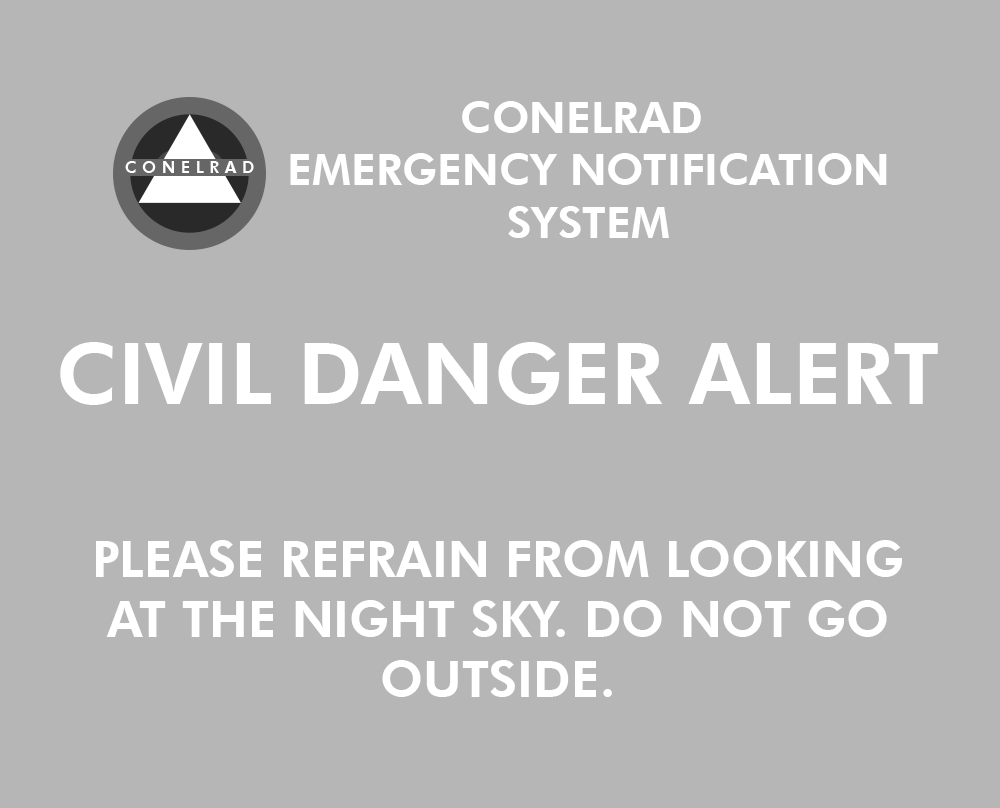
<style>
.page{position:relative;width:1000px;height:808px;background:#b6b6b6}
.page>*{position:absolute;margin:0}
.t1{font:43.7px "FuturaBT-Heavy";color:#ffffff;text-transform:uppercase}
.t2{font:16.3px "FuturaBT-Heavy";letter-spacing:0.34em;color:#ffffff;text-transform:uppercase}
.t3{font:85.6px "FuturaBT-Heavy";color:#ffffff;text-transform:uppercase}
.t4{font:50px "FuturaBT-Heavy";color:#ffffff;text-transform:uppercase}
</style>
<div class="page">
<p class="t1" style="left:290px;top:101px;width:597px;height:137px;text-align:center">CONELRAD <br>EMERGENCY NOTIFICATION<br>SYSTEM</p>
<p class="t2" style="left:125px;top:161px;width:129px;height:12px">CONELRAD</p>
<p class="t3" style="left:60px;top:342px;width:878px;height:63px">CIVIL DANGER ALERT</p>
<p class="t4" style="left:96px;top:540px;width:806px;height:157px;text-align:center">please refrain from looking at the night sky. DO NOT GO<br>OUTSIDE.</p>
</div>
